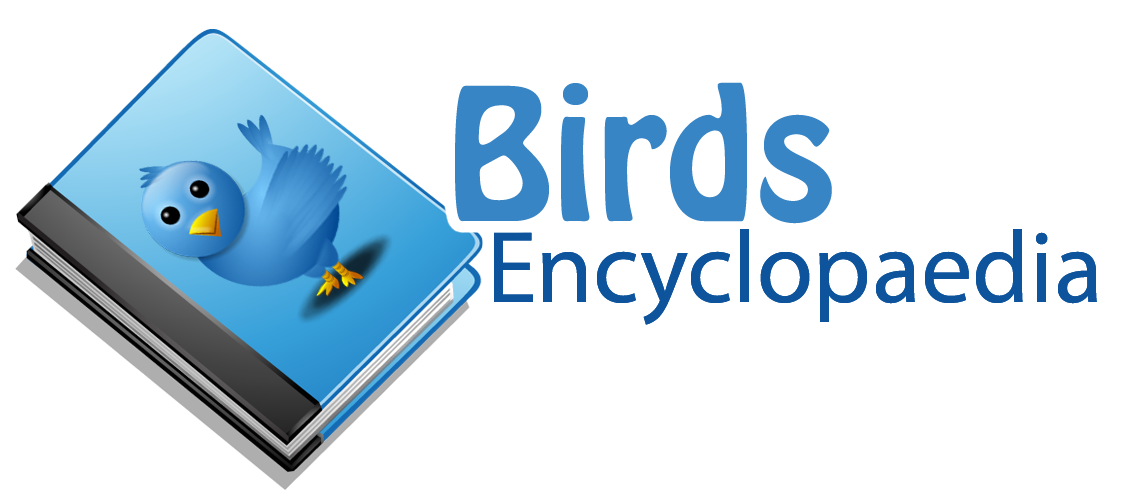
<style>
.page{position:relative;width:1127px;height:504px;background:#ffffff}
.page>*{position:absolute;margin:0}
.t1{font:162.1px "HoboStd";color:#3885c5}
.t2{font:102.2px "MyriadPro-Regular";color:#0d549d}
</style>
<div class="page">
<p class="t1" style="left:455px;top:82px;width:377px;height:142px">Birds</p>
<p class="t2" style="left:494px;top:229px;width:603px;height:96px">Encyclopaedia</p>
<p class="t2" style="left:494px;top:229px;width:603px;height:96px">Encyclopaedia</p>
</div>
